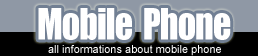
<style>
.page{position:relative;width:258px;height:56px;background:#ffffff}
.page>*{position:absolute;margin:0}
.t1{font:40px "Impact";letter-spacing:-0.025em;color:#ffffff;scale:0.9 1}
.t2{font:11px "ArialMT";color:#ffffff}
</style>
<div class="page">
<p class="t1" style="left:38px;top:8px;width:193px;height:32px">Mobile  Phone</p>
<p class="t2" style="left:48px;top:45px;width:173px;height:11px">all informations about mobile phone</p>
</div>
